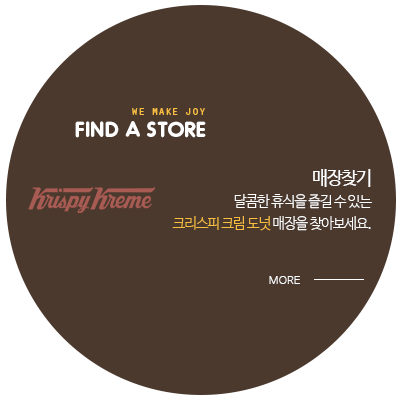
<style>
.page{position:relative;width:400px;height:400px;background:#4b392e}
.page>*{position:absolute;margin:0}
.t1{font:12.5px "OratorStd";color:#fabe41;scale:0.9 1}
.t2{font:22.2px "Oduda-Bold";color:#ffffff}
.t3{font:15.3px/22.2px "NanumBarunGothicLight";letter-spacing:-0.05em;color:#ffffff;scale:0.9 1}
.t4{font:19.4px/33.3px "NanumBarunGothic";letter-spacing:-0.05em;color:#ffffff;scale:0.9 1}
.t5{font:15.3px/22.2px "NanumBarunGothicLight";letter-spacing:-0.05em;color:#fabe41;scale:0.9 1}
.t6{font:11.1px "NanumBarunGothicLight";color:#ffffff}
</style>
<div class="page">
<p class="t1" style="left:132px;top:108px;width:73px;height:7px">we make joy</p>
<p class="t2" style="left:75px;top:121px;width:131px;height:17px">FIND A STORE</p>
<p class="t3" style="left:172px;top:169px;width:200px;height:62px;text-align:right"><span class="t4">매장찾기<br></span>달콤한 휴식을 즐길 수 있는<br><span class="t5">크리스피 크림 도넛</span> 매장을 찾아보세요.</p>
<p class="t6" style="left:269px;top:276px;width:31px;height:8px">MORE</p>
</div>
